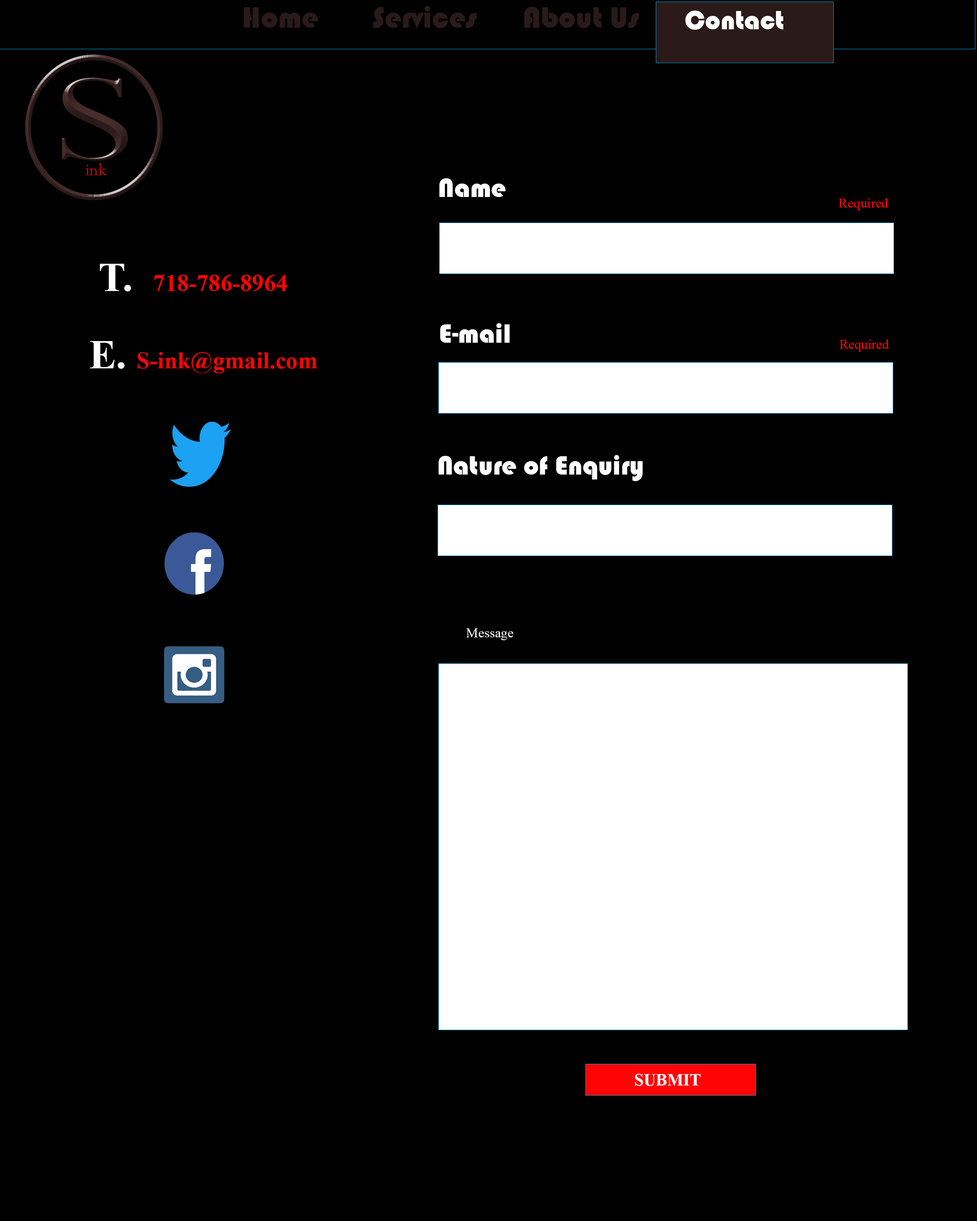
<style>
.page{position:relative;width:977px;height:1221px;background:#000000}
.page>*{position:absolute;margin:0}
.t1{font:30.5px "Bauhaus93";color:#2a1a1a}
.t2{font:27.1px "Bauhaus93";color:#ffffff}
.t3{font:137.8px "Perpetua";color:#382323;scale:1.43 1}
.t4{font:19px "Perpetua"}
.t5{font:13.6px "TimesNewRomanPSMT";color:#ff0404}
.t6{font:23.7px "TimesNewRomanPS-BoldMT";color:#fa0404}
.t7{font:40.7px "TimesNewRomanPS-BoldMT";color:#ffffff}
.t8{font:13.6px "TimesNewRomanPSMT";color:#ffffff}
.t9{font:17px "TimesNewRomanPS-BoldMT";color:#ffffff}
</style>
<div class="page">
<p class="t1" style="left:244px;top:6px;width:395px;height:22px">Home       Services      About Us</p>
<p class="t2" style="left:685px;top:11px;width:98px;height:19px">Contact</p>
<p class="t3" style="left:62px;top:78px;width:66px;height:83px">S</p>
<p class="t4" style="left:85px;top:163px;width:22px;height:12px">ink</p>
<p class="t2" style="left:439px;top:178px;width:66px;height:19px">Name</p>
<p class="t5" style="left:838px;top:198px;width:50px;height:12px">Required</p>
<p class="t6" style="left:90px;top:264px;width:227px;height:109px;text-align:center"><span class="t7">T.  </span>718-786-8964<br><br><span class="t7">  E. </span>S-ink@gmail.com</p>
<p class="t2" style="left:440px;top:323px;width:70px;height:20px">E-mail</p>
<p class="t5" style="left:839px;top:339px;width:50px;height:13px">Required</p>
<p class="t2" style="left:438px;top:455px;width:205px;height:26px">Nature of Enquiry</p>
<p class="t8" style="left:466px;top:628px;width:47px;height:12px">Message</p>
<p class="t9" style="left:635px;top:1074px;width:65px;height:12px">SUBMIT</p>
</div>
